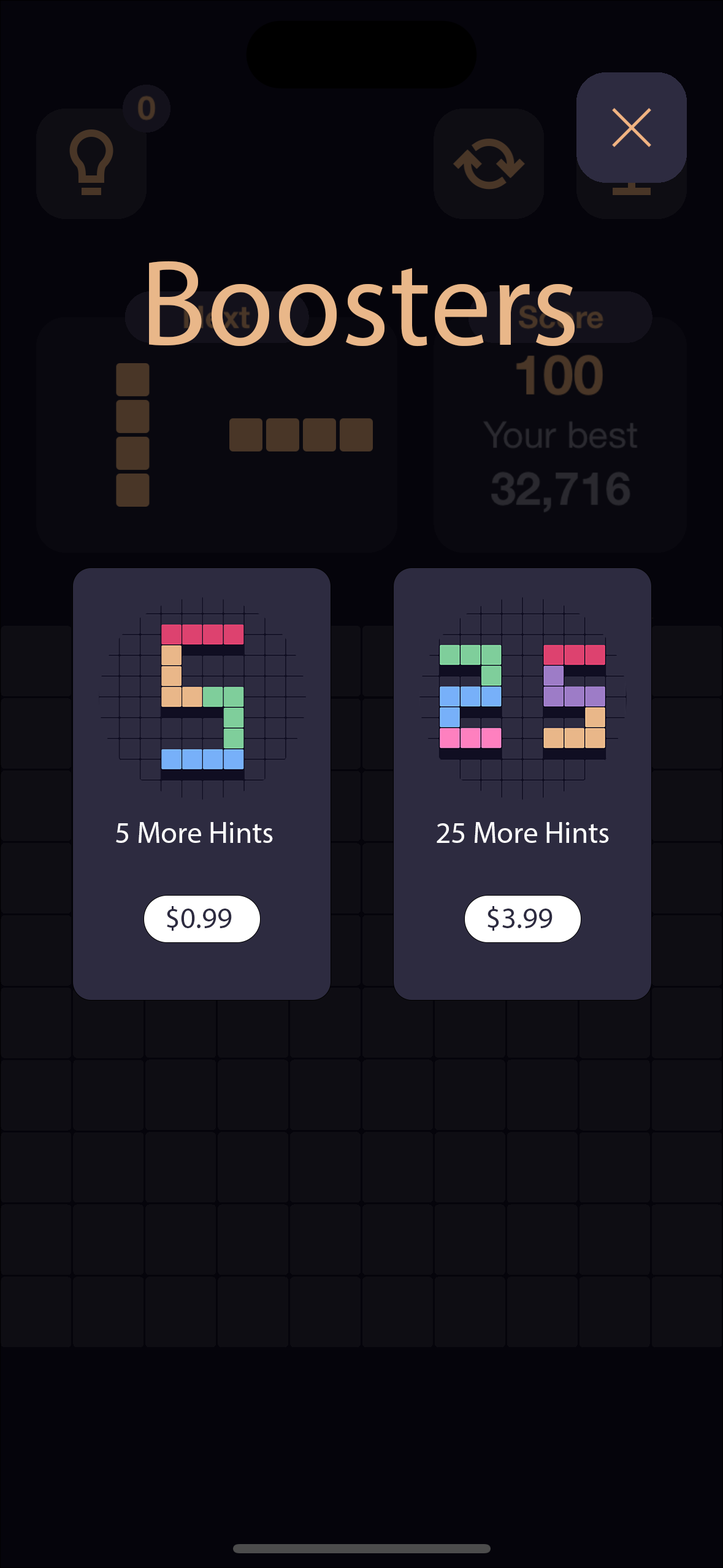
<style>
.page{position:relative;width:723px;height:1568px;background:#05040b}
.page>*{position:absolute;margin:0}
.t1{font:122.7px "MyriadPro-Regular";color:#e9b789}
.t2{font:30.1px "MyriadPro-Regular";color:#ffffff}
.t3{font:30.1px "MyriadPro-Regular";color:#2d2b40}
</style>
<div class="page">
<p class="t1" style="left:149px;top:261px;width:426px;height:86px">Boosters</p>
<p class="t2" style="left:116px;top:822px;width:157px;height:21px">5 More Hints</p>
<p class="t2" style="left:437px;top:822px;width:172px;height:21px">25 More Hints</p>
<p class="t3" style="left:167px;top:906px;width:65px;height:25px">$0.99</p>
<p class="t3" style="left:488px;top:906px;width:65px;height:25px">$3.99</p>
</div>
